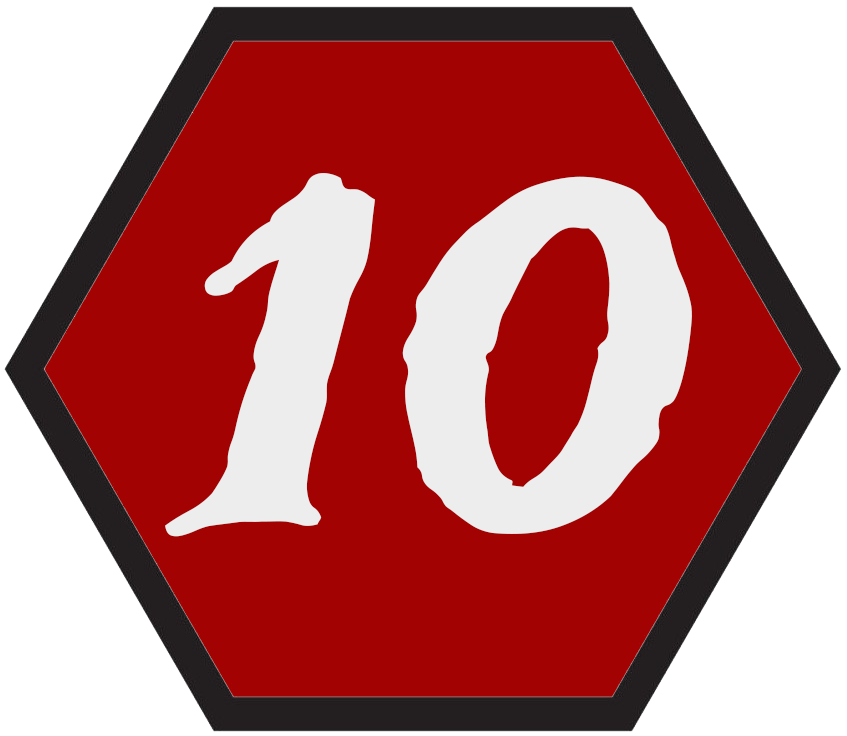
<style>
.page{position:relative;width:847px;height:736px;background:#a20202}
.page>*{position:absolute;margin:0}
.t1{font:466.7px "TradeWinds";color:#ededed}
</style>
<div class="page">
<p class="t1" style="left:165px;top:173px;width:527px;height:364px">10</p>
</div>
